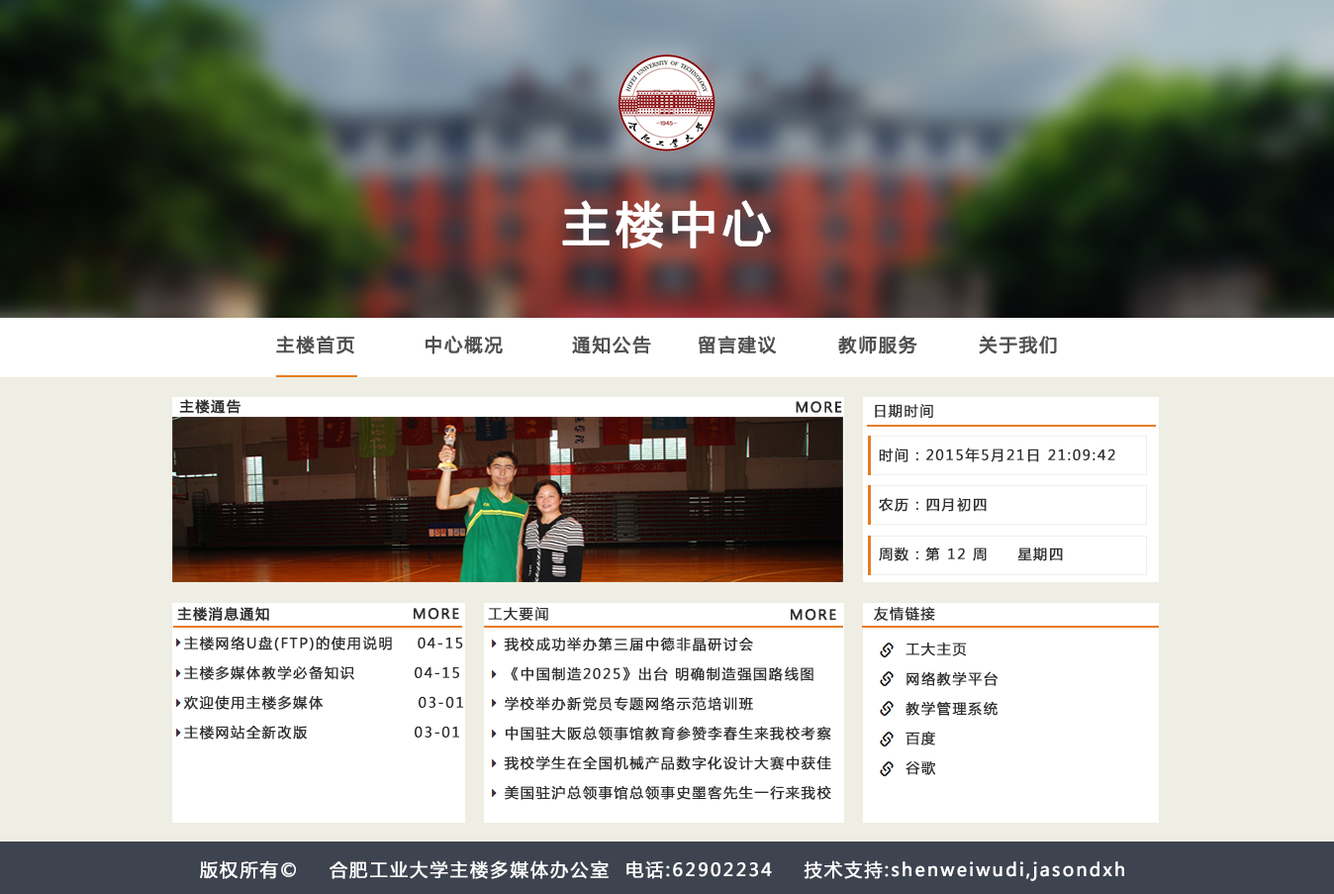
<style>
.page{position:relative;width:1334px;height:894px;background:#ffffff}
.page>*{position:absolute;margin:0}
.t1{font:47.5px "MicrosoftYaHei";letter-spacing:0.1em;color:#ffffff;font-weight:bold}
.t2{font:13.9px "MicrosoftYaHei";letter-spacing:0.1em;color:#303030;font-weight:bold}
.t3{font:13.9px/29.7px "MicrosoftYaHei";letter-spacing:0.1em;color:#303030;font-weight:bold}
.t4{font:17.8px "MicrosoftYaHei";letter-spacing:0.1em;color:#ffffff;font-weight:bold}
</style>
<div class="page">
<p class="t1" style="left:562px;top:200px;width:209px;height:48px">主楼中心</p>
<p class="t2" style="left:179px;top:399px;width:62px;height:15px">主楼通告</p>
<p class="t2" style="left:796px;top:401px;width:46px;height:12px">MORE</p>
<p class="t2" style="left:875px;top:404px;width:58px;height:14px">日期时间</p>
<p class="t2" style="left:879px;top:447px;width:236px;height:15px">时间：2015年5月21日 21:09:42</p>
<p class="t2" style="left:879px;top:497px;width:108px;height:15px">农历：四月初四</p>
<p class="t2" style="left:879px;top:546px;width:184px;height:15px">周数：第 12 周     星期四</p>
<p class="t2" style="left:177px;top:607px;width:92px;height:15px">主楼消息通知</p>
<p class="t2" style="left:414px;top:608px;width:45px;height:12px">MORE</p>
<p class="t2" style="left:488px;top:607px;width:60px;height:14px">工大要闻</p>
<p class="t2" style="left:791px;top:609px;width:45px;height:12px">MORE</p>
<p class="t2" style="left:874px;top:607px;width:61px;height:14px">友情链接</p>
<p class="t3" style="left:183px;top:635px;width:280px;height:104px">主楼网络U盘(FTP)的使用说明    04-15<br>主楼多媒体教学必备知识          04-15  <br>欢迎使用主楼多媒体                03-01   <br>主楼网站全新改版                  03-01</p>
<p class="t3" style="left:504px;top:636px;width:327px;height:164px">我校成功举办第三届中德非晶研讨会 <br>  《中国制造2025》出台 明确制造强国路线图 <br>  学校举办新党员专题网络示范培训班 <br>  中国驻大阪总领事馆教育参赞李春生来我校考察 <br>  我校学生在全国机械产品数字化设计大赛中获佳<br>  美国驻沪总领事馆总领事史墨客先生一行来我校访问</p>
<p class="t3" style="left:906px;top:641px;width:93px;height:134px">工大主页<br> 网络教学平台<br> 教学管理系统<br> 百度<br> 谷歌<br> 新浪</p>
<p class="t4" style="left:200px;top:860px;width:924px;height:21px">版权所有©    合肥工业大学主楼多媒体办公室  电话:62902234    技术支持:shenweiwudi,jasondxh</p>
</div>
